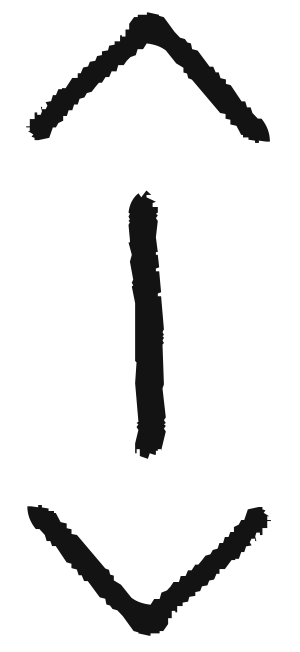
<style>
.page{position:relative;width:300px;height:652px;background:#ffffff}
.page>*{position:absolute;margin:0}
.t1{font:345.3px "Hosofuwafont";color:#131313;scale:1.79 1}
.t2{font:412px "Hosofuwafont";color:#131313;scale:1.17 1}
</style>
<div class="page">
<p class="t1" style="left:26px;top:12px;width:244px;height:131px;rotate:-180deg">v</p>
<p class="t2" style="left:128px;top:190px;width:38px;height:269px">l</p>
<p class="t1" style="left:27px;top:505px;width:244px;height:131px">v</p>
</div>
